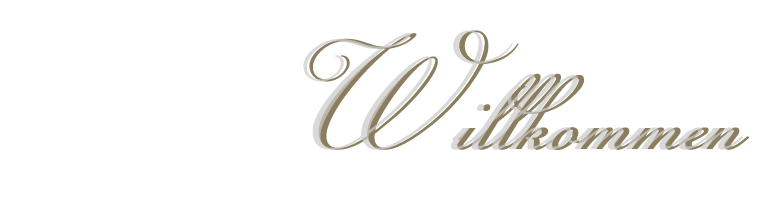
<style>
.page{position:relative;width:760px;height:200px;background:#ffffff}
.page>*{position:absolute;margin:0}
.t1{font:150px "Champignon";color:#8a7e5e}
</style>
<div class="page">
<p class="t1" style="left:309px;top:30px;width:440px;height:120px">Willkommen</p>
</div>
